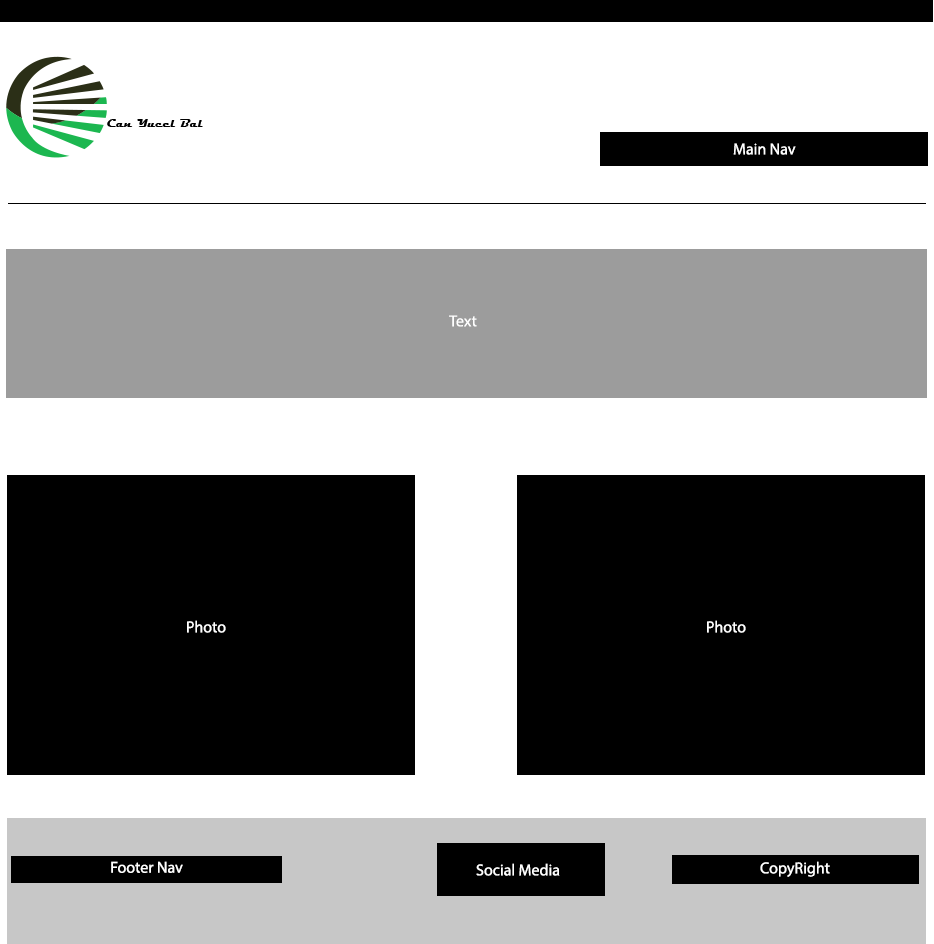
<style>
.page{position:relative;width:934px;height:944px;background:#ffffff}
.page>*{position:absolute;margin:0}
.t1{font:12px "MyriadPro-Regular";color:#ffffff}
</style>
<div class="page">
<p class="t1" style="left:733px;top:143px;width:63px;height:12px">Main Nav</p>
<p class="t1" style="left:449px;top:315px;width:28px;height:12px">Text</p>
<p class="t1" style="left:187px;top:620px;width:39px;height:13px">Photo</p>
<p class="t1" style="left:707px;top:620px;width:39px;height:13px">Photo</p>
<p class="t1" style="left:111px;top:861px;width:72px;height:12px">Footer Nav</p>
<p class="t1" style="left:476px;top:863px;width:84px;height:13px">Social Media</p>
<p class="t1" style="left:760px;top:861px;width:70px;height:16px">CopyRight</p>
</div>
